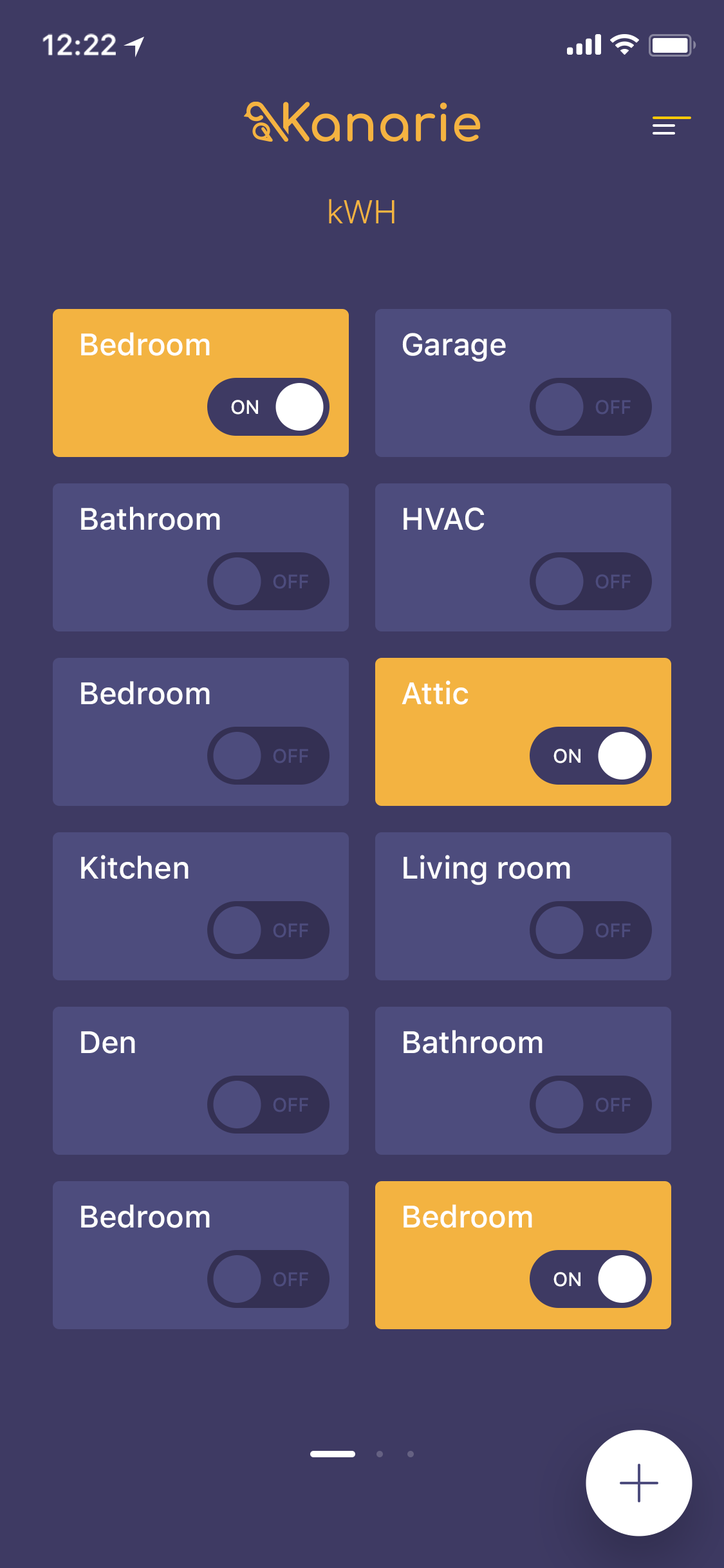
<style>
.page{position:relative;width:724px;height:1568px;background:#3e3a63}
.page>*{position:absolute;margin:0}
.t1{font:29px "SFProText-Semibold";letter-spacing:-0.02em;color:#ffffff}
.t2{font:32.8px "SFProText-Light";letter-spacing:-0.024em;color:#f3b341}
.t3{font:30.9px "SFProText-Medium";letter-spacing:-0.01em;color:#ffffff}
.t4{font:19.3px "SFProText-Medium";letter-spacing:-0.01em;color:#ffffff;text-transform:uppercase}
.t5{font:19.3px "SFProText-Medium";letter-spacing:-0.01em;color:#4d4c7d;text-transform:uppercase}
</style>
<div class="page">
<p class="t1" style="left:42px;top:33px;width:74px;height:23px">12:22</p>
<p class="t2" style="left:329px;top:199px;width:66px;height:24px">kWH</p>
<p class="t3" style="left:81px;top:332px;width:129px;height:24px">Bedroom</p>
<p class="t3" style="left:402px;top:333px;width:104px;height:29px">Garage</p>
<p class="t4" style="left:231px;top:400px;width:27px;height:15px">on</p>
<p class="t5" style="left:595px;top:400px;width:36px;height:15px">off</p>
<p class="t3" style="left:81px;top:507px;width:139px;height:23px">Bathroom</p>
<p class="t3" style="left:404px;top:507px;width:81px;height:23px">HVAC</p>
<p class="t5" style="left:273px;top:574px;width:35px;height:15px">off</p>
<p class="t5" style="left:595px;top:574px;width:36px;height:15px">off</p>
<p class="t3" style="left:81px;top:681px;width:129px;height:24px">Bedroom</p>
<p class="t3" style="left:402px;top:680px;width:67px;height:25px">Attic</p>
<p class="t5" style="left:273px;top:749px;width:35px;height:14px">off</p>
<p class="t4" style="left:554px;top:749px;width:27px;height:14px">on</p>
<p class="t3" style="left:81px;top:855px;width:108px;height:24px">Kitchen</p>
<p class="t3" style="left:404px;top:855px;width:166px;height:30px">Living room</p>
<p class="t5" style="left:273px;top:923px;width:35px;height:15px">off</p>
<p class="t5" style="left:595px;top:923px;width:36px;height:15px">off</p>
<p class="t3" style="left:81px;top:1031px;width:54px;height:23px">Den</p>
<p class="t3" style="left:404px;top:1030px;width:139px;height:24px">Bathroom</p>
<p class="t5" style="left:273px;top:1097px;width:35px;height:15px">off</p>
<p class="t5" style="left:595px;top:1097px;width:36px;height:15px">off</p>
<p class="t3" style="left:81px;top:1204px;width:129px;height:24px">Bedroom</p>
<p class="t3" style="left:404px;top:1204px;width:128px;height:24px">Bedroom</p>
<p class="t5" style="left:273px;top:1272px;width:35px;height:15px">off</p>
<p class="t4" style="left:554px;top:1272px;width:27px;height:15px">on</p>
</div>
